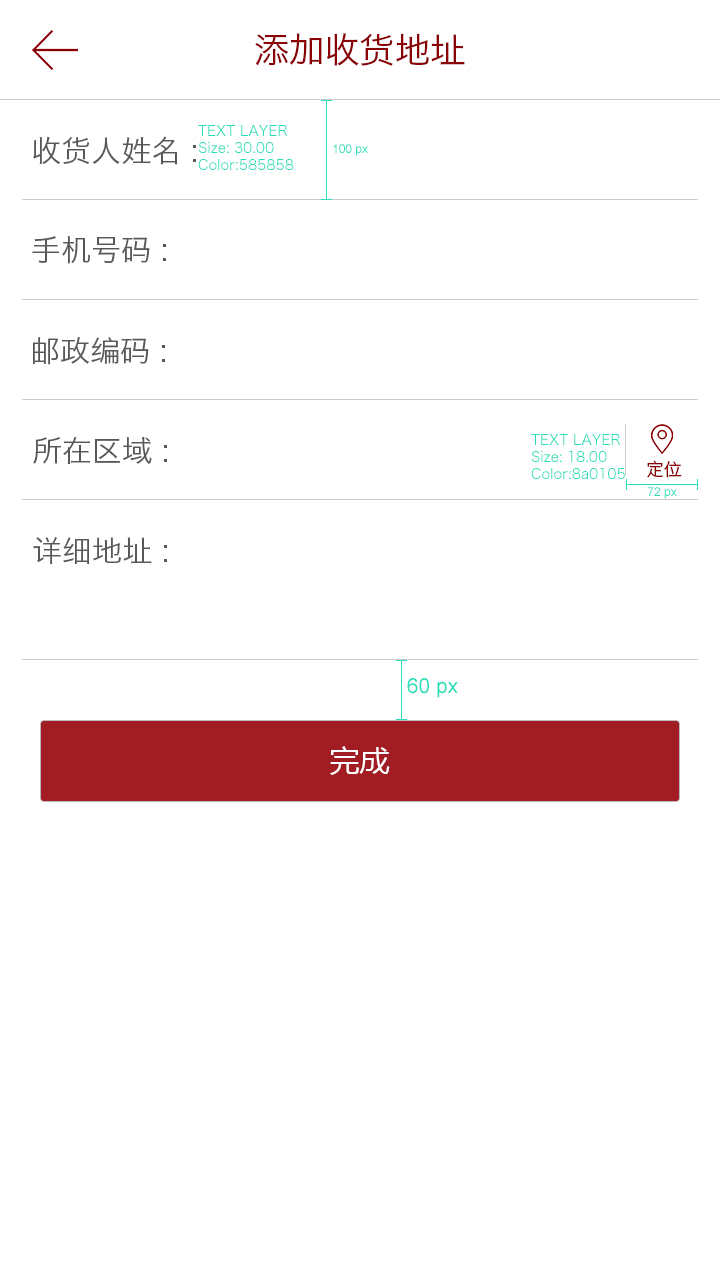
<style>
.page{position:relative;width:720px;height:1280px;background:#ffffff}
.page>*{position:absolute;margin:0}
.t1{font:35.2px "HiraginoSansGB-W3";color:#8a0105}
.t2{font:14px "HiraginoSansGB-W3";color:#28ddb9}
.t3{font:30px "HiraginoSansGB-W3";color:#585858}
.t4{font:12px "ArialMT";color:#28ddb9}
.t5{font:18px "HiraginoSansGB-W3";color:#8a0105}
.t6{font:20.8px "ArialMT";color:#28ddb9}
.t7{font:30px "MicrosoftYaHei";color:#ffffff}
</style>
<div class="page">
<p class="t1" style="left:255px;top:33px;width:210px;height:33px">添加收货地址</p>
<p class="t2" style="left:198px;top:125px;width:96px;height:45px">TEXT LAYER<br>Size: 30.00<br>Color:585858</p>
<p class="t3" style="left:33px;top:136px;width:163px;height:29px">收货人姓名 :</p>
<p class="t4" style="left:333px;top:144px;width:35px;height:12px">100 px</p>
<p class="t3" style="left:32px;top:236px;width:134px;height:28px">手机号码 :</p>
<p class="t3" style="left:32px;top:337px;width:133px;height:28px">邮政编码 :</p>
<p class="t3" style="left:33px;top:437px;width:134px;height:27px">所在区域 :</p>
<p class="t2" style="left:531px;top:434px;width:94px;height:45px">TEXT LAYER<br>Size: 18.00<br>Color:8a0105</p>
<p class="t5" style="left:647px;top:460px;width:35px;height:18px">定位</p>
<p class="t4" style="left:647px;top:487px;width:30px;height:12px">72 px</p>
<p class="t3" style="left:33px;top:537px;width:134px;height:27px">详细地址 :</p>
<p class="t6" style="left:407px;top:678px;width:51px;height:20px">60 px</p>
<p class="t7" style="left:330px;top:746px;width:60px;height:29px">完成</p>
</div>
